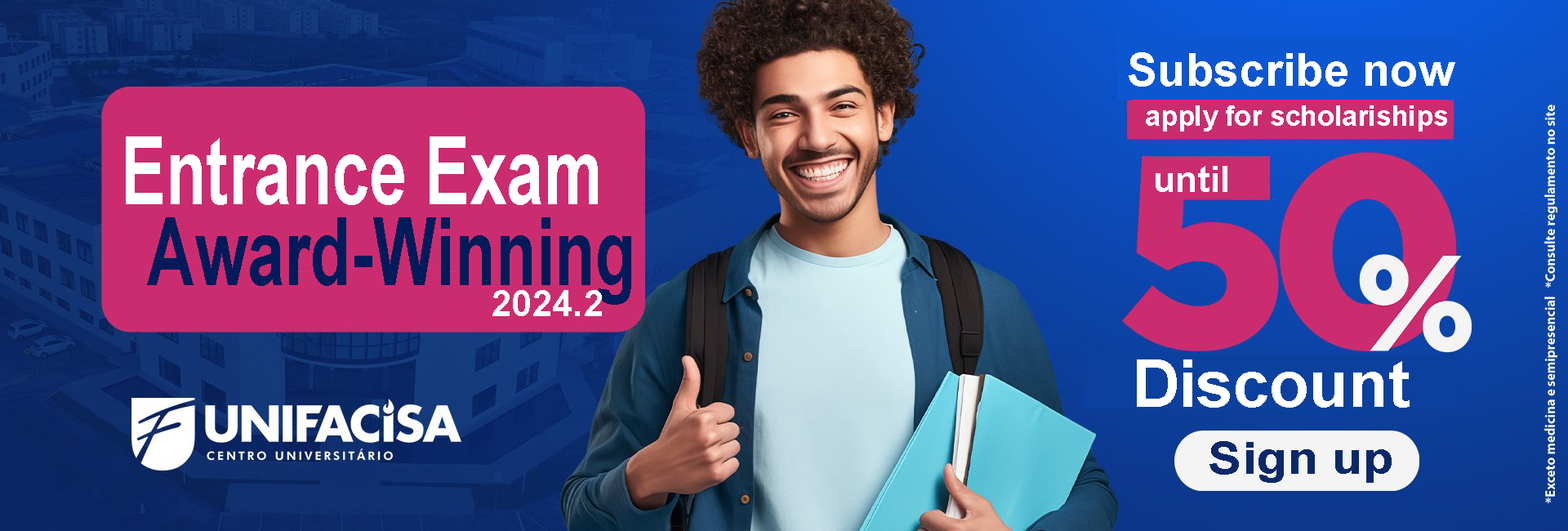
<style>
.page{position:relative;width:1568px;height:531px}
.page>*{position:absolute;margin:0}
.t1{font:46px "Arial-BoldMT";color:#ffffff}
.t2{font:27.7px "Arial-BoldMT";color:#ffffff}
.t3{font:93.9px "Arial-BoldMT";color:#ffffff;scale:0.71 1}
.t4{font:36.8px "Arial-BoldMT";color:#ffffff}
.t5{font:93.9px "Arial-BoldMT";color:#011a5a;scale:0.71 1}
.t6{font:64.9px "Arial-BoldMT";color:#ffffff}
.t7{font:44.1px "Arial-BoldMT";color:#0b2969;scale:1.15 1}
</style>
<div class="page">
<p class="t1" style="left:1129px;top:52px;width:326px;height:35px">Subscribe now</p>
<p class="t2" style="left:1146px;top:105px;width:301px;height:26px">apply for scholariships</p>
<p class="t3" style="left:126px;top:136px;width:472px;height:69px">Entrance Exam</p>
<p class="t4" style="left:1156px;top:166px;width:71px;height:26px">until</p>
<p class="t5" style="left:147px;top:217px;width:484px;height:88px">Award-Winning</p>
<p class="t4" style="left:492px;top:290px;width:110px;height:26px">2024.2</p>
<p class="t6" style="left:1137px;top:359px;width:273px;height:49px">Discount</p>
<p class="t7" style="left:1209px;top:441px;width:183px;height:42px">Sign up</p>
</div>
